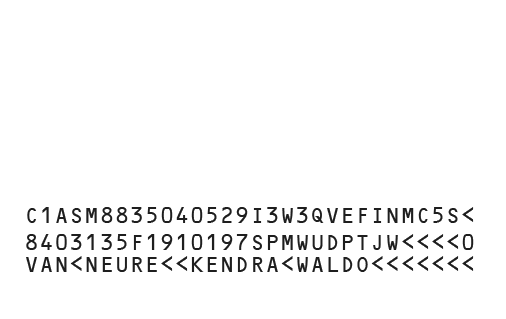
<style>
.page{position:relative;width:506px;height:319px;background:#ffffff}
.page>*{position:absolute;margin:0}
.t1{font:25px "OCRB10PitchBT-Regular";color:#1e1e1e}
</style>
<div class="page">
<p class="t1" style="left:27px;top:207px;width:447px;height:16px">C1ASM8835040529I3W3QVEFINMC5S&lt;</p>
<p class="t1" style="left:26px;top:234px;width:448px;height:16px">8403135F1910197SPMWUDPTJW&lt;&lt;&lt;&lt;0</p>
<p class="t1" style="left:26px;top:256px;width:448px;height:16px">VAN&lt;NEURE&lt;&lt;KENDRA&lt;WALDO&lt;&lt;&lt;&lt;&lt;&lt;&lt;</p>
</div>
